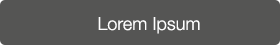
<style>
.page{position:relative;width:280px;height:45px;background:#555554}
.page>*{position:absolute;margin:0}
.t1{font:18px "HelveticaNeue-Light";letter-spacing:0.005em;color:#ffffff}
</style>
<div class="page">
<p class="t1" style="left:98px;top:17px;width:102px;height:17px">Lorem Ipsum</p>
</div>
